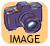
<style>
.page{position:relative;width:50px;height:46px;background:#ffcb80}
.page>*{position:absolute;margin:0}
.t1{font:11px "TrebuchetMS";color:#040404}
</style>
<div class="page">
<p class="t1" style="left:10px;top:35px;width:30px;height:8px">IMAGE</p>
</div>
